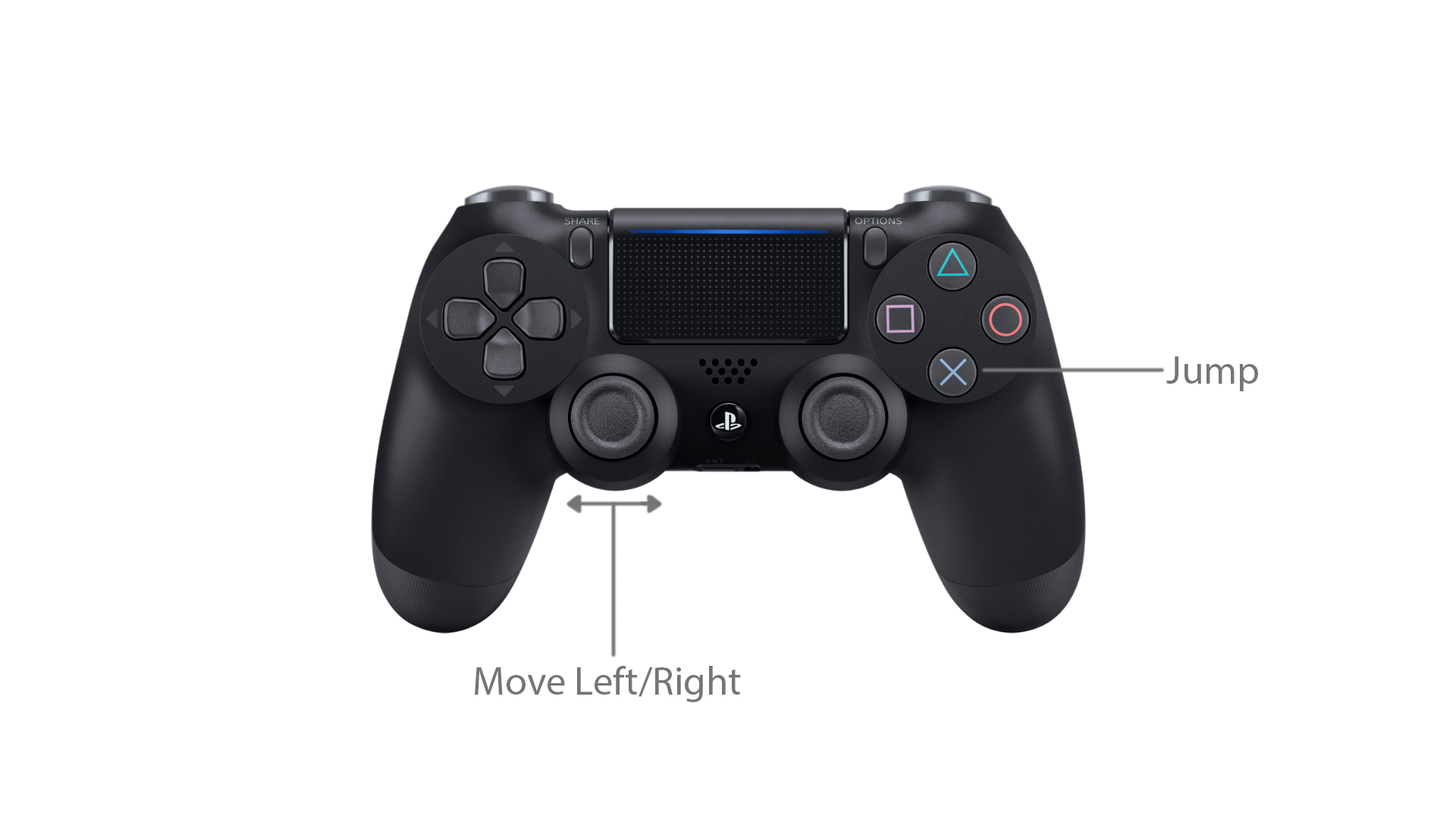
<style>
.page{position:relative;width:1456px;height:819px;background:#ffffff}
.page>*{position:absolute;margin:0}
.t1{font:40.2px "MyriadPro-Regular";color:#757575}
</style>
<div class="page">
<p class="t1" style="left:1166px;top:356px;width:92px;height:35px">Jump</p>
<p class="t1" style="left:475px;top:666px;width:266px;height:36px">Move Left/Right</p>
</div>
